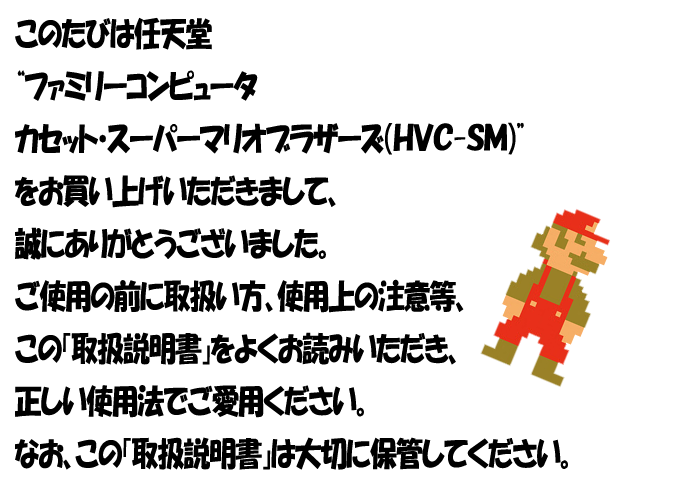
<style>
.page{position:relative;width:680px;height:480px;background:#ffffff}
.page>*{position:absolute;margin:0}
.t1{font:33px "HGPSoeiKakupoptai";letter-spacing:-0.015em;color:#000000;scale:0.82 1}
</style>
<div class="page">
<p class="t1" style="left:15px;top:17px;width:553px;height:453px">このたびは任天堂<br>“ファミリーコンピュータ　<br>カセット・スーパーマリオブラザーズ（ＨＶＣ-ＳＭ）”<br>をお買い上げいただきまして、<br>誠にありがとうございました。<br>ご使用の前に取扱い方、使用上の注意等、<br>この「取扱説明書」をよくお読みいただき、<br>正しい使用法でご愛用ください。<br>なお、この「取扱説明書」は大切に保管してください。</p>
</div>
